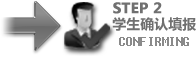
<style>
.page{position:relative;width:196px;height:57px;background:#ffffff}
.page>*{position:absolute;margin:0}
.t1{font:14px/16px "MicrosoftYaHei-Bold";color:#707070;font-weight:bold}
.t2{font:14px/16px "MicrosoftYaHei-Bold";color:#707070}
.t3{font:14px "Fixedsys";letter-spacing:-0.06em;color:#8a8a8a}
</style>
<div class="page">
<p class="t1" style="left:112px;top:2px;width:84px;height:29px">STEP 2<br><span class="t2"> 学生确认填报</span></p>
<p class="t3" style="left:119px;top:37px;width:70px;height:9px">CONFIRMING</p>
</div>
